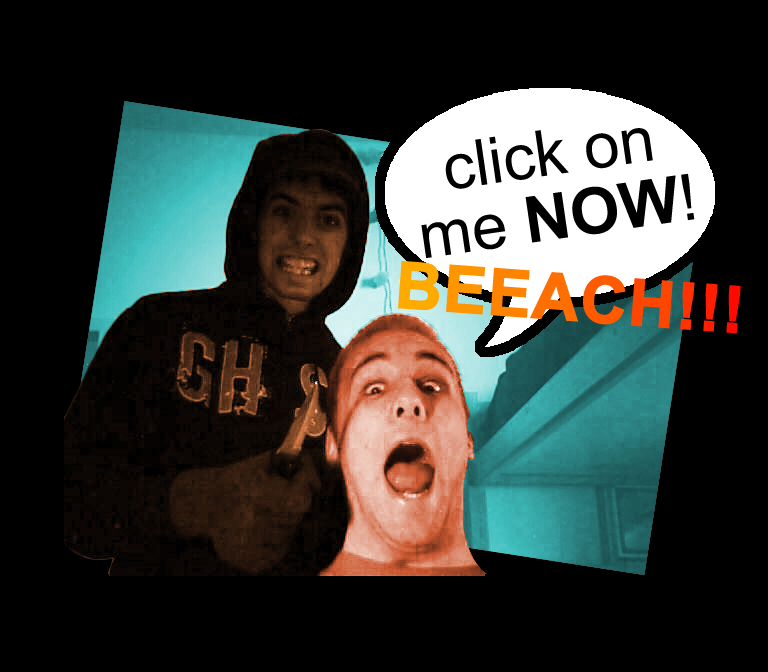
<style>
.page{position:relative;width:768px;height:672px;background:#000000}
.page>*{position:absolute;margin:0}
.t1{font:64.3px/64.3px "ArialMT";color:#000000}
.t2{font:64.3px/64.3px "Arial-BoldMT";color:#000000}
.t3{font:64.3px "Arial-BoldMT";color:#ffaa00;font-weight:bold}
.t4{font:64.3px "Arial-BoldMT";color:#ff9600;font-weight:bold}
.t5{font:64.3px "Arial-BoldMT";color:#ff8200;font-weight:bold}
.t6{font:64.3px "Arial-BoldMT";color:#ff6e00;font-weight:bold}
.t7{font:64.3px "Arial-BoldMT";color:#ff5a00;font-weight:bold}
.t8{font:64.3px "Arial-BoldMT";color:#ff4600;font-weight:bold}
.t9{font:64.3px "Arial-BoldMT";color:#ff3200;font-weight:bold}
.t10{font:64.3px "Arial-BoldMT";color:#ff1e00;font-weight:bold}
.t11{font:64.3px "Arial-BoldMT";color:#ff0a00;font-weight:bold}
</style>
<div class="page">
<p class="t1" style="left:421px;top:128px;width:274px;height:131px;text-align:center;rotate:-8deg">click on<br>me <span class="t2">NOW</span>!</p>
<p class="t3" style="left:398px;top:260px;width:343px;height:74px;rotate:4deg">B<span class="t4">E</span><span class="t5">E</span><span class="t6">A</span><span class="t7">C</span><span class="t8">H</span><span class="t9">!</span><span class="t10">!</span><span class="t11">!</span></p>
</div>
